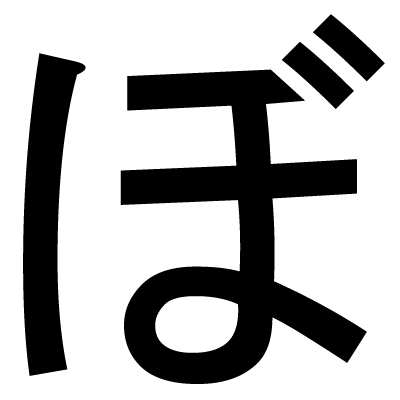
<style>
.page{position:relative;width:400px;height:400px;background:#ffffff}
.page>*{position:absolute;margin:0}
.t1{font:416.7px "MS-PGothic";color:#000000}
</style>
<div class="page">
<p class="t1" style="left:23px;top:14px;width:362px;height:370px">ぼ</p>
</div>
